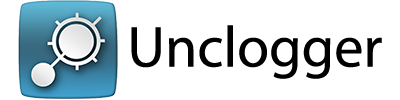
<style>
.page{position:relative;width:400px;height:100px;background:#ffffff}
.page>*{position:absolute;margin:0}
.t1{font:58.1px "MyriadPro-Regular";color:#000000}
</style>
<div class="page">
<p class="t1" style="left:131px;top:25px;width:251px;height:54px">Unclogger</p>
</div>
